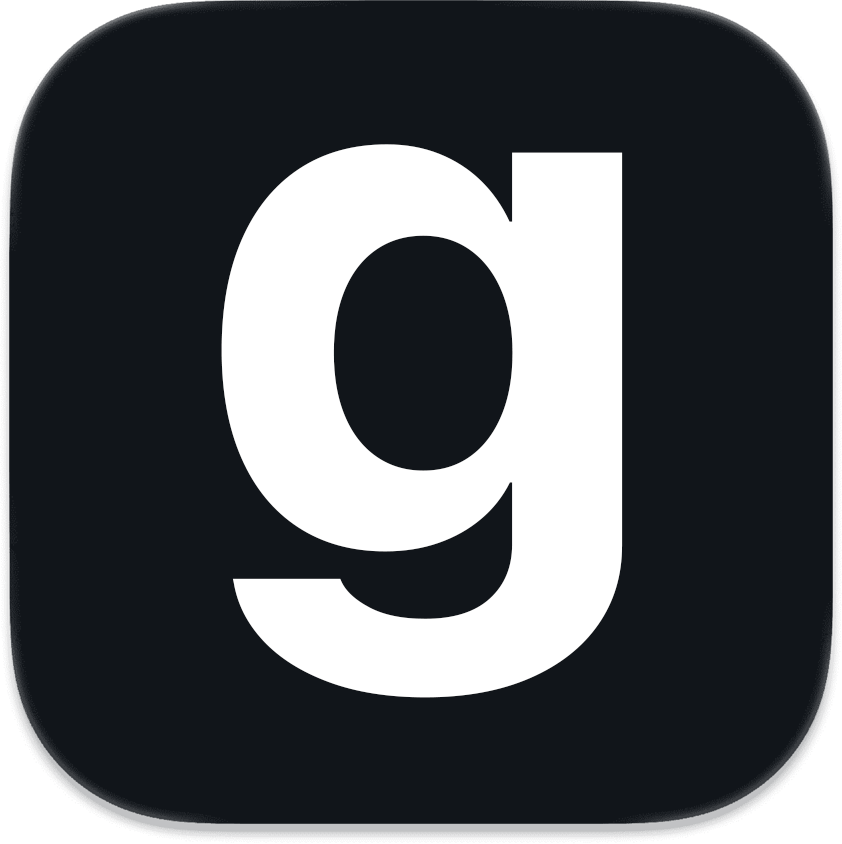
<style>
.page{position:relative;width:842px;height:844px;background:#11151a}
.page>*{position:absolute;margin:0}
.t1{font:772.4px "SFPro-Bold";color:#ffffff}
</style>
<div class="page">
<p class="t1" style="left:221px;top:144px;width:402px;height:554px">g</p>
</div>
